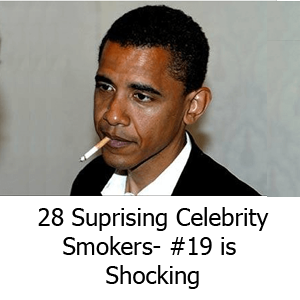
<style>
.page{position:relative;width:300px;height:300px;background:#ffffff}
.page>*{position:absolute;margin:0}
.t1{font:24px "Tahoma";color:#000000}
</style>
<div class="page">
<p class="t1" style="left:38px;top:207px;width:231px;height:82px;text-align:center">28 Suprising Celebrity<br>Smokers- #19 is <br>Shocking</p>
</div>
